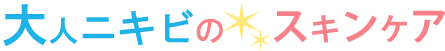
<style>
.page{position:relative;width:445px;height:51px;background:#ffffff}
.page>*{position:absolute;margin:0}
.t1{font:38.5px "HGSGothicE";color:#1eb2e9}
.t2{font:46.3px "HGSGothicE";color:#1eb2e9}
.t3{font:30.8px "HGSGothicE";color:#1eb2e9}
.t4{font:30.8px "HGSGothicE";color:#f88088}
.t5{font:38.6px "KozGoPr6N-Bold";color:#f88088}
.t6{font:30.9px "KozGoPr6N-Bold";color:#f88088}
</style>
<div class="page">
<p class="t1" style="left:3px;top:4px;width:220px;height:42px"><span class="t2">大</span><span class="t3">人</span>ニキビ<span class="t4">の</span></p>
<p class="t5" style="left:273px;top:10px;width:173px;height:33px">ス<span class="t6">キ</span>ン<span class="t6">ケ</span>ア</p>
</div>
